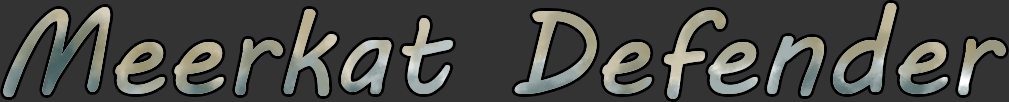
<style>
.page{position:relative;width:1009px;height:102px;background:#333333}
.page>*{position:absolute;margin:0}
.t1{font:119px "MVBoli"}
</style>
<div class="page">
<p class="t1" style="left:3px;top:3px;width:1003px;height:96px">Meerkat Defender</p>
</div>
